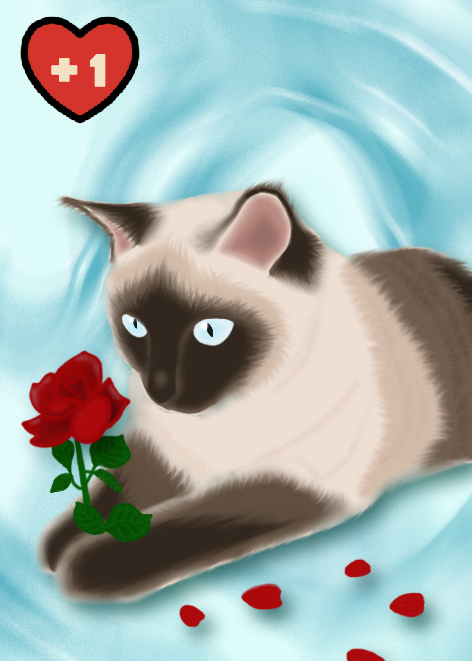
<style>
.page{position:relative;width:472px;height:661px}
.page>*{position:absolute;margin:0}
.t1{font:50px "Filicudi-Solid";letter-spacing:0.13em;color:#f2e1c3;font-weight:bold;scale:1.1 1}
</style>
<div class="page">
<p class="t1" style="left:51px;top:54px;width:55px;height:33px">+1</p>
</div>
